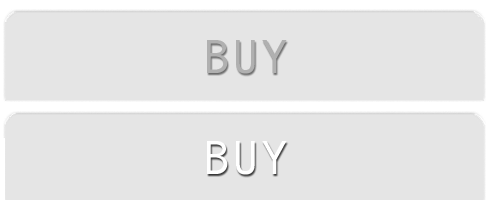
<style>
.page{position:relative;width:490px;height:200px;background:#e5e5e5}
.page>*{position:absolute;margin:0}
.t1{font:48px "AndaleMono";color:#999999}
.t2{font:48px "AndaleMono";color:#ffffff}
</style>
<div class="page">
<p class="t1" style="left:207px;top:40px;width:80px;height:34px;opacity:0.7">BUY</p>
<p class="t2" style="left:207px;top:141px;width:80px;height:34px">BUY</p>
</div>
